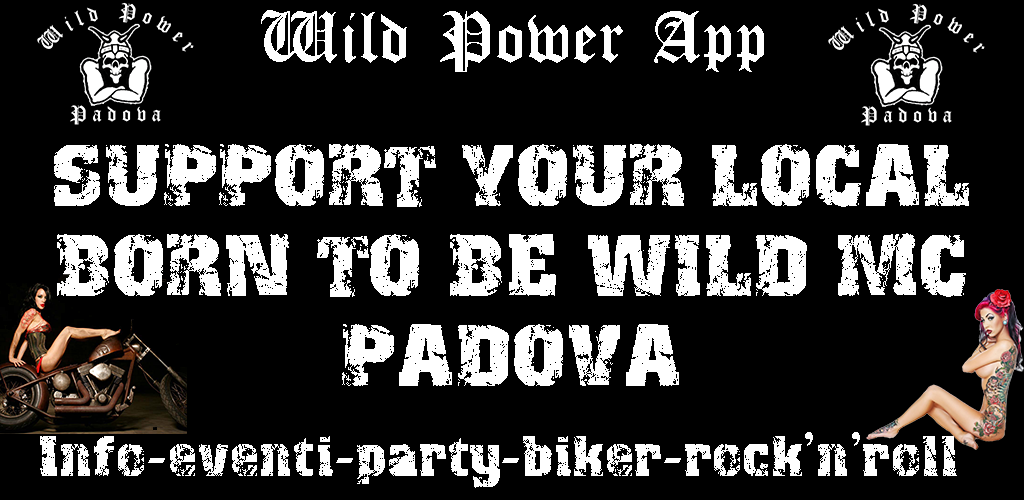
<style>
.page{position:relative;width:1024px;height:500px;background:#000000}
.page>*{position:absolute;margin:0}
.t1{font:75px "CloisterBlack-Light";color:#ffffff}
.t2{font:75px "Distress";color:#ffffff}
.t3{font:50px "Distress";color:#ffffff}
</style>
<div class="page">
<p class="t1" style="left:261px;top:10px;width:503px;height:62px">Wild Power App</p>
<p class="t2" style="left:54px;top:144px;width:915px;height:242px;text-align:center">SUPPORT YOUR LOCAL<br>BORN TO BE WILD MC<br>PADOVA</p>
<p class="t3" style="left:40px;top:432px;width:917px;height:56px">Info-eventi-party-biker-rock’n’roll</p>
</div>
